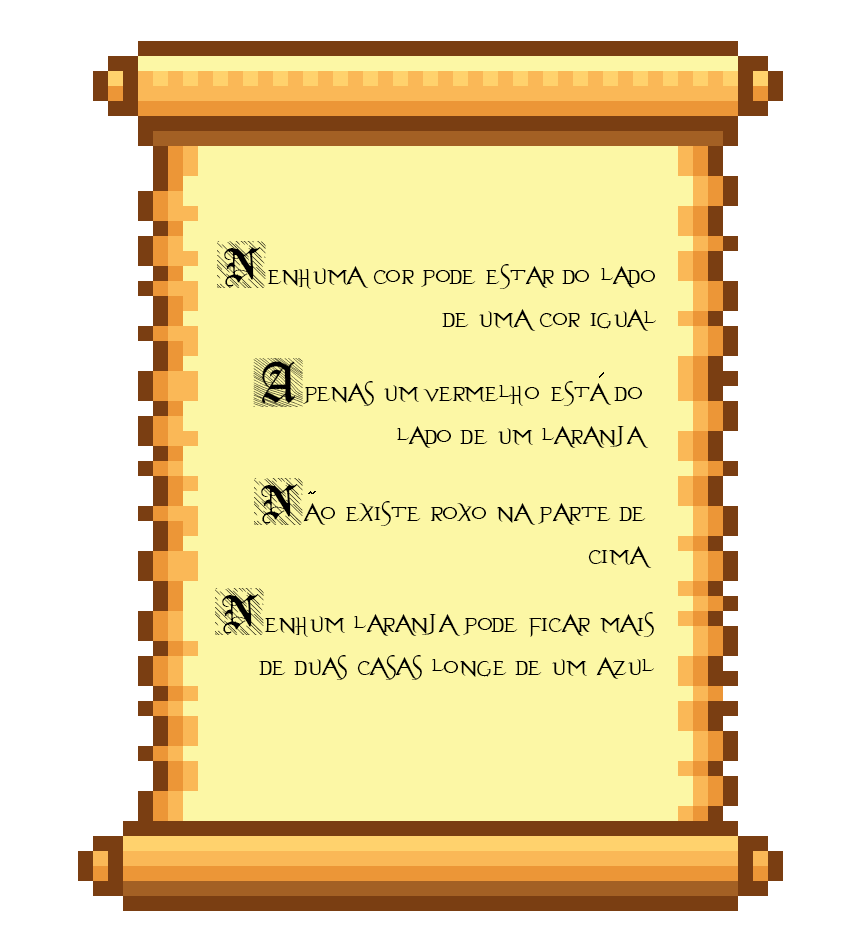
<style>
.page{position:relative;width:860px;height:951px;background:#fcf7a5}
.page>*{position:absolute;margin:0}
.t1{font:72px "Cosmopolite-Regular";color:#000000}
.t2{font:36px "Evanescent";color:#000000}
</style>
<div class="page">
<p class="t1" style="left:217px;top:241px;width:49px;height:47px">N</p>
<p class="t2" style="left:267px;top:264px;width:389px;height:67px;text-align:right">enhuma cor pode estar do lado de uma cor igual</p>
<p class="t1" style="left:253px;top:358px;width:50px;height:49px">A</p>
<p class="t2" style="left:303px;top:381px;width:346px;height:67px;text-align:right">penas um vermelho esta do lado de um laranja</p>
<p class="t1" style="left:254px;top:478px;width:49px;height:47px">N</p>
<p class="t2" style="left:303px;top:501px;width:349px;height:67px;text-align:right">ao existe roxo na parte de cima</p>
<p class="t1" style="left:215px;top:588px;width:49px;height:47px">N</p>
<p class="t2" style="left:259px;top:612px;width:395px;height:68px;text-align:right">enhum laranja pode ficar mais de duas casas longe de um azul</p>
</div>
